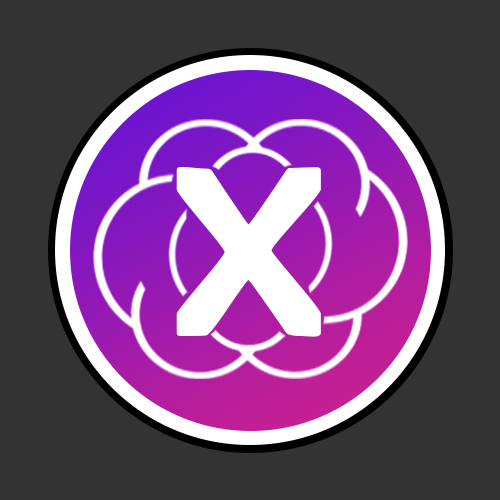
<style>
.page{position:relative;width:500px;height:500px;background:#333333}
.page>*{position:absolute;margin:0}
.t1{font:362.2px "BerlinSansFB-Reg";color:#ffffff}
</style>
<div class="page">
<p class="t1" style="left:176px;top:167px;width:145px;height:170px">x</p>
</div>
